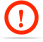
<style>
.page{position:relative;width:43px;height:42px;background:#ffffff}
.page>*{position:absolute;margin:0}
.t1{font:21.9px "BernardMT-Condensed";color:#ff2700;scale:1.06 1}
</style>
<div class="page">
<p class="t1" style="left:19px;top:9px;width:5px;height:19px">!</p>
</div>
